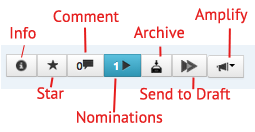
<style>
.page{position:relative;width:255px;height:132px;background:#ffffff}
.page>*{position:absolute;margin:0}
.t1{font:16px "PTSans-Regular";color:#e62020}
</style>
<div class="page">
<p class="t1" style="left:53px;top:10px;width:66px;height:12px">Comment</p>
<p class="t1" style="left:195px;top:8px;width:53px;height:16px">Amplify</p>
<p class="t1" style="left:133px;top:26px;width:51px;height:13px">Archive</p>
<p class="t1" style="left:37px;top:87px;width:27px;height:12px">Star</p>
<p class="t1" style="left:140px;top:87px;width:91px;height:13px">Send to Draft</p>
<p class="t1" style="left:77px;top:111px;width:86px;height:12px">Nominations</p>
</div>
